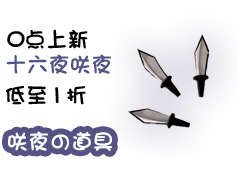
<style>
.page{position:relative;width:238px;height:180px;background:#ffffff}
.page>*{position:absolute;margin:0}
.t1{font:12.9px "DFMaruMoji-W9-WINP-RKSJ-H";color:#000000}
.t2{font:21.5px "DFMaruMoji-W9-WINP-RKSJ-H";color:#555383}
.t3{font:21.5px "DFMaruMoji-W9-WINP-RKSJ-H";color:#feffff}
</style>
<div class="page">
<p class="t1" style="left:7px;top:29px;width:81px;height:20px">0点上新</p>
<p class="t2" style="left:6px;top:54px;width:105px;height:20px">十六夜咲夜</p>
<p class="t1" style="left:6px;top:86px;width:80px;height:19px">低至1折</p>
<p class="t3" style="left:8px;top:131px;width:104px;height:20px">咲夜の道具</p>
</div>
